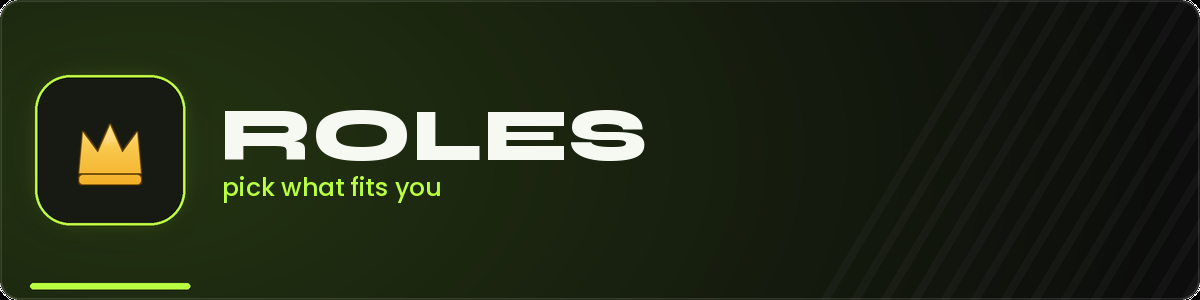
<style>
.page{position:relative;width:1200px;height:300px}
.page>*{position:absolute;margin:0}
.t1{font:75px "Syne-ExtraBold";color:#f6f8f2}
.t2{font:25px "Poppins-Medium";color:#baff40}
</style>
<div class="page">
<p class="t1" style="left:225px;top:110px;width:420px;height:51px">ROLES</p>
<p class="t2" style="left:224px;top:176px;width:216px;height:27px">pick what fits you</p>
</div>
